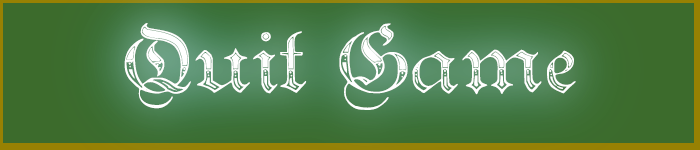
<style>
.page{position:relative;width:700px;height:150px}
.page>*{position:absolute;margin:0}
.t1{font:72px "TeutonicNo4-DemiBold";color:#ffffff}
</style>
<div class="page">
<p class="t1" style="left:124px;top:23px;width:452px;height:87px">Quit Game</p>
</div>
